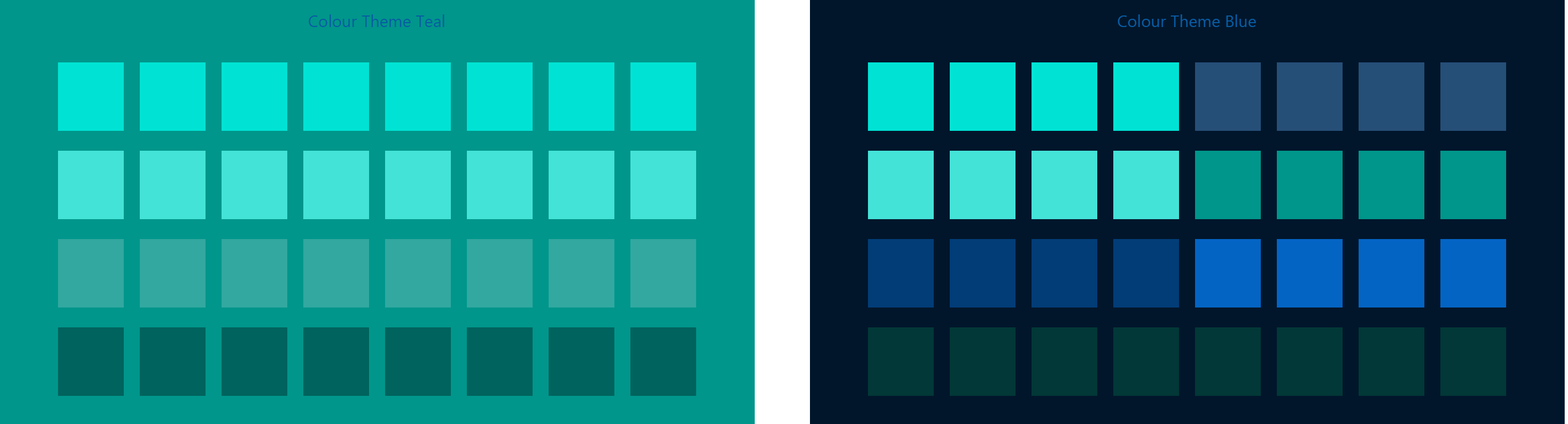
<style>
.page{position:relative;width:1568px;height:424px;background:#00968b}
.page>*{position:absolute;margin:0}
.t1{font:16.6px "SegoeUI";color:#085ba3}
</style>
<div class="page">
<p class="t1" style="left:308px;top:14px;width:136px;height:13px">Colour Theme Teal</p>
<p class="t1" style="left:1118px;top:14px;width:138px;height:13px">Colour Theme Blue</p>
</div>
